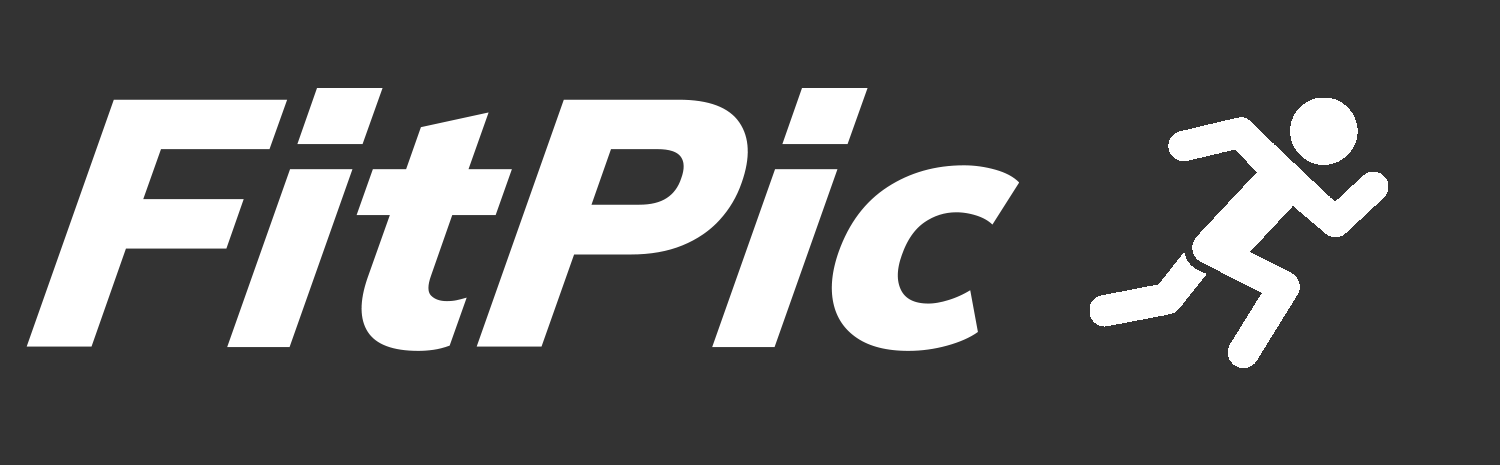
<style>
.page{position:relative;width:1500px;height:465px;background:#333333}
.page>*{position:absolute;margin:0}
.t1{font:350px "Mulish-BlackItalic";color:#ffffff;font-style:italic}
</style>
<div class="page">
<p class="t1" style="left:26px;top:88px;width:993px;height:263px">FitPic</p>
</div>
